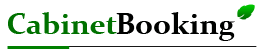
<style>
.page{position:relative;width:260px;height:54px;background:#ffffff}
.page>*{position:absolute;margin:0}
.t1{font:30px "Constantia-Bold";color:#007100}
.t2{font:30px "Constantia-Bold";color:#000100}
</style>
<div class="page">
<p class="t1" style="left:8px;top:12px;width:109px;height:22px">Cabinet</p>
<p class="t2" style="left:116px;top:12px;width:119px;height:29px">Booking</p>
</div>
